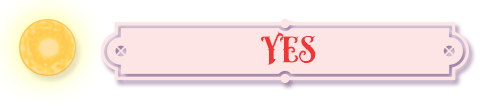
<style>
.page{position:relative;width:484px;height:106px;background:#ffffff}
.page>*{position:absolute;margin:0}
.t1{font:41.7px "Moyers";color:#f23434}
</style>
<div class="page">
<p class="t1" style="left:261px;top:31px;width:55px;height:34px">YES</p>
</div>
